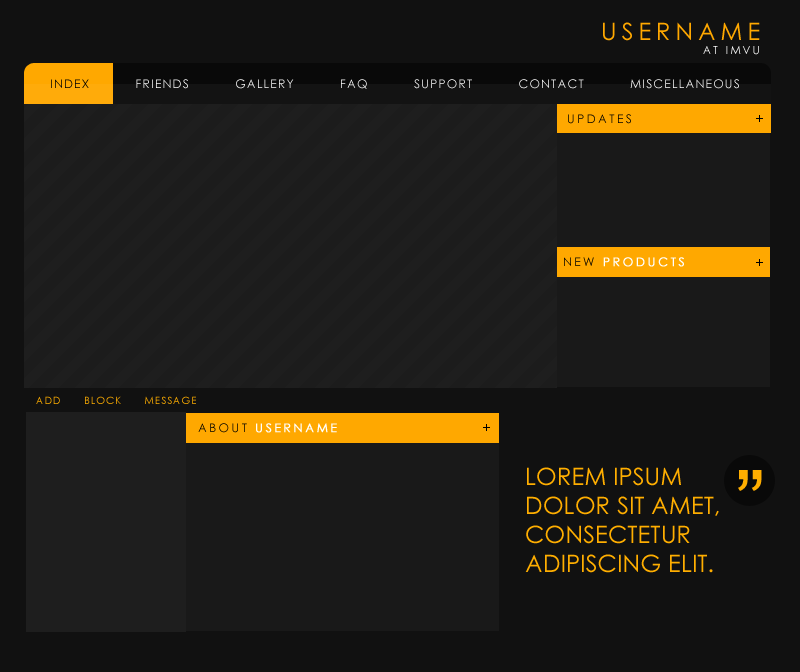
<style>
.page{position:relative;width:800px;height:672px;background:#111111}
.page>*{position:absolute;margin:0}
.t1{font:24px "CenturyGothic";letter-spacing:0.2em;color:#ffa800;text-transform:uppercase}
.t2{font:11px "CenturyGothic";letter-spacing:0.2em;color:#ffffff;text-transform:uppercase}
.t3{font:12px "CenturyGothic";letter-spacing:0.1em;color:#ffffff;text-transform:uppercase}
.t4{font:12px "CenturyGothic";letter-spacing:0.1em;color:#000000;text-transform:uppercase}
.t5{font:12px "CenturyGothic";letter-spacing:0.2em;color:#000000;text-transform:uppercase}
.t6{font:12px "CenturyGothic";letter-spacing:0.2em;color:#ffffff;text-transform:uppercase;font-weight:bold}
.t7{font:10px "CenturyGothic";letter-spacing:0.1em;text-transform:uppercase}
.t8{font:24px "CenturyGothic";color:#ffae00;text-transform:uppercase}
</style>
<div class="page">
<p class="t1" style="left:603px;top:22px;width:157px;height:19px">Username</p>
<p class="t2" style="left:703px;top:46px;width:56px;height:9px">at imvu</p>
<p class="t3" style="left:51px;top:79px;width:688px;height:10px"><span class="t4">index</span>          friends          gallery          faq          support          contact          miscellaneous</p>
<p class="t5" style="left:568px;top:114px;width:63px;height:10px">updates</p>
<p class="t6" style="left:564px;top:257px;width:120px;height:10px"><span class="t5">new </span>products</p>
<p class="t7" style="left:36px;top:396px;width:160px;height:8px">add      block      message</p>
<p class="t6" style="left:198px;top:423px;width:139px;height:10px"><span class="t5">about </span>username</p>
<p class="t8" style="left:525px;top:467px;width:194px;height:106px">Lorem ipsum dolor sit amet, consectetur adipiscing elit.</p>
</div>
